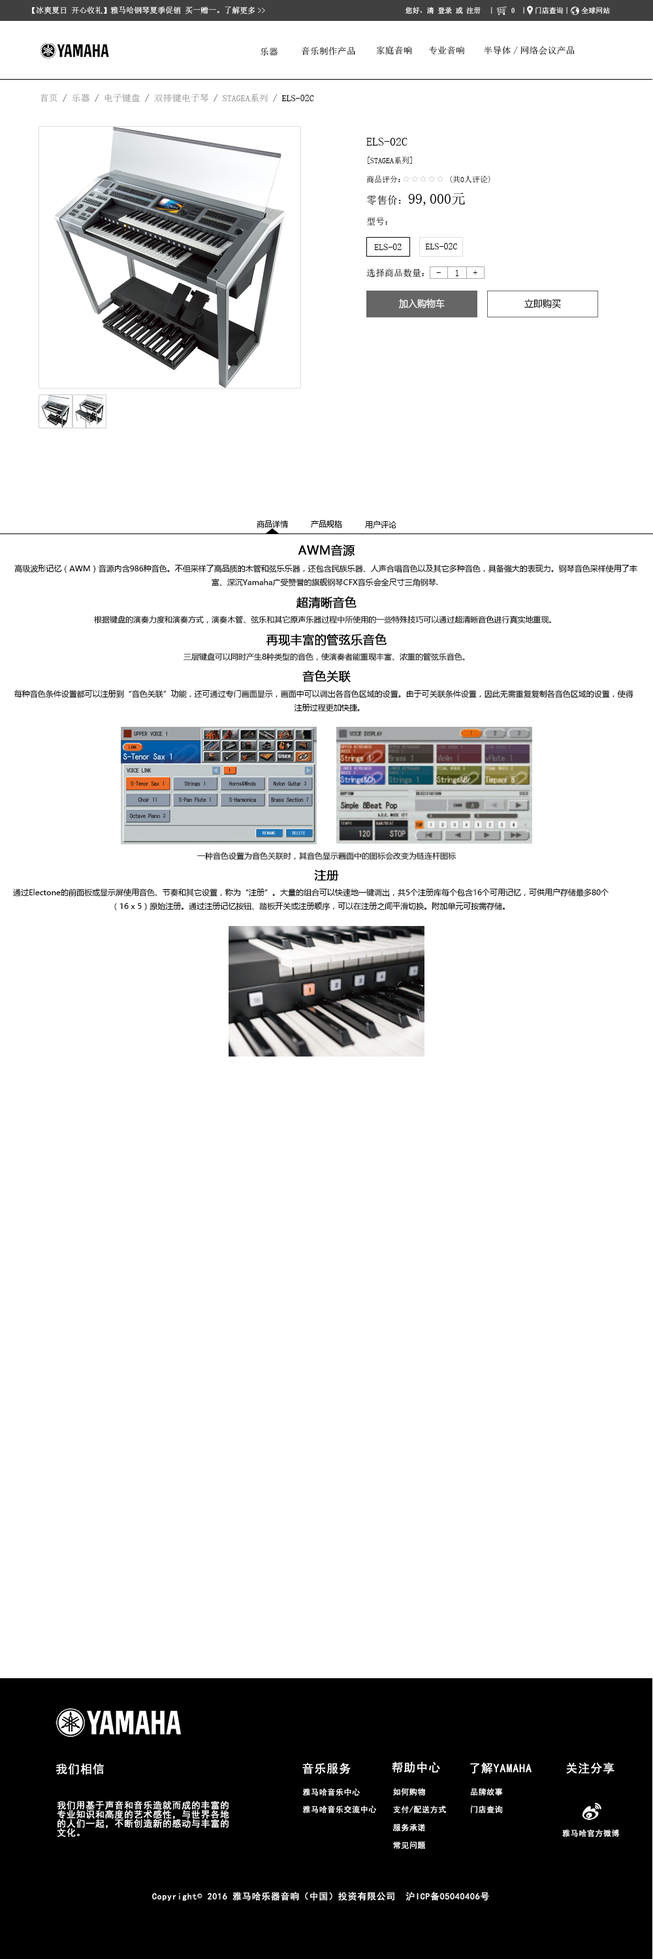
<style>
.page{position:relative;width:653px;height:1959px;background:#ffffff}
.page>*{position:absolute;margin:0}
.t1{font:7.8px "SimSun";color:#ffffff}
.t2{font:7.2px "SimSun";color:#ffffff}
.t3{font:9px "SimSun"}
.t4{font:9px "SimSun";color:#000000}
.t5{font:9px "SimSun";color:#010101}
.t6{font:9.1px "SimSun";color:#000000}
.t7{font:9.1px "SimSun";color:#999999}
.t8{font:11.8px "SimSun";color:#000000}
.t9{font:7.8px "SimSun";color:#000000}
.t10{font:14.4px "SimSun";color:#000000}
.t11{font:10.4px "SimSun";color:#000000}
.t12{font:9.4px "MicrosoftYaHei";color:#ffffff}
.t13{font:9.4px "MicrosoftYaHei";color:#000000}
.t14{font:7.8px "MicrosoftYaHei";color:#000000}
.t15{font:11.8px "MicrosoftYaHei";color:#000000;font-weight:bold}
.t16{font:7.6px "MicrosoftYaHei";color:#000000}
.t17{font:11.8px "SimHei";letter-spacing:0.05em;color:#ffffff}
.t18{font:7.8px "SimHei";letter-spacing:0.05em;color:#ffffff}
.t19{font:9.1px/9.1px "SimHei";letter-spacing:0.05em;color:#ffffff}
.t20{font:9px "SimHei";letter-spacing:0.05em;color:#ffffff}
.t21{font:9px "SimSun";letter-spacing:0.05em;color:#ffffff}
</style>
<div class="page">
<p class="t1" style="left:32px;top:7px;width:233px;height:7px">【冰爽夏日 开心收礼】雅马哈钢琴夏季促销 买一赠一。 了解更多&gt;&gt;</p>
<p class="t2" style="left:406px;top:7px;width:204px;height:7px">您好，清 登录 或 注册  丨    ０ 丨  门店查询丨   全球网站</p>
<p class="t3" style="left:261px;top:48px;width:17px;height:8px">乐器</p>
<p class="t4" style="left:301px;top:46px;width:54px;height:10px">音乐制作产品</p>
<p class="t4" style="left:376px;top:46px;width:36px;height:9px">家庭音响</p>
<p class="t4" style="left:428px;top:46px;width:36px;height:9px">专业音响</p>
<p class="t5" style="left:484px;top:46px;width:90px;height:9px">半导体/网络会议产品</p>
<p class="t6" style="left:40px;top:93px;width:274px;height:10px"><span class="t7">首页</span> / <span class="t7">乐器</span> / <span class="t7">电子键盘</span> / <span class="t7">双排键电子琴</span> / <span class="t7">STAGEA系列</span> / ELS-02C</p>
<p class="t8" style="left:366px;top:137px;width:42px;height:9px">ELS-02C</p>
<p class="t9" style="left:368px;top:157px;width:44px;height:7px">[STAGEA系列]</p>
<p class="t9" style="left:366px;top:176px;width:124px;height:8px">商品评分：           (共0人评论)</p>
<p class="t10" style="left:366px;top:193px;width:100px;height:13px"><span class="t11">零售价：</span>99,000元</p>
<p class="t6" style="left:367px;top:217px;width:20px;height:8px">型号：</p>
<p class="t6" style="left:374px;top:244px;width:28px;height:7px">ELS-02</p>
<p class="t6" style="left:425px;top:243px;width:33px;height:7px">ELS-02C</p>
<p class="t6" style="left:366px;top:268px;width:58px;height:10px">选择商品数量：</p>
<p class="t6" style="left:456px;top:270px;width:3px;height:6px">1</p>
<p class="t6" style="left:436px;top:272px;width:5px;height:1px">-</p>
<p class="t6" style="left:473px;top:270px;width:4px;height:5px">+</p>
<p class="t12" style="left:399px;top:298px;width:46px;height:11px">加入购物车</p>
<p class="t13" style="left:524px;top:299px;width:37px;height:10px">立即购买</p>
<p class="t14" style="left:257px;top:520px;width:32px;height:8px">商品详情</p>
<p class="t14" style="left:311px;top:520px;width:31px;height:8px">产品规格</p>
<p class="t14" style="left:365px;top:521px;width:31px;height:7px">用户评论</p>
<p class="t15" style="left:298px;top:544px;width:57px;height:12px">AWM音源</p>
<p class="t14" style="left:14px;top:564px;width:623px;height:22px;text-align:center">高级波形记忆（AWM）音源内含986种音色。不但采样了高品质的木管和弦乐乐器，还包含民族乐器、人声合唱音色以及其它多种音色，具备强大的表现力。钢琴音色采样使用了丰<br>富、深沉Yamaha广受赞誉的旗舰钢琴CFX音乐会全尺寸三角钢琴.</p>
<p class="t15" style="left:297px;top:596px;width:60px;height:13px">超清晰音色</p>
<p class="t16" style="left:94px;top:615px;width:458px;height:9px">根据键盘的演奏力度和演奏方式，演奏木管、弦乐和其它原声乐器过程中所使用的一些特殊技巧可以通过超清晰音色进行真实地重现。</p>
<p class="t15" style="left:266px;top:633px;width:121px;height:13px">再现丰富的管弦乐音色</p>
<p class="t16" style="left:184px;top:652px;width:281px;height:9px">三层键盘可以同时产生8种类型的音色，使演奏者能重现丰富、浓重的管弦乐音色。</p>
<p class="t15" style="left:302px;top:670px;width:49px;height:12px">音色关联</p>
<p class="t14" style="left:14px;top:690px;width:619px;height:22px;text-align:center">每种音色条件设置都可以注册到“音色关联”功能，还可通过专门画面显示，画面中可以调出各音色区域的设置。由于可关联条件设置，因此无需重复复制各音色区域的设置，使得<br>     注册过程更加快捷。</p>
<p class="t16" style="left:197px;top:852px;width:260px;height:8px">一种音色设置为音色关联时，其音色显示画面中的图标会改变为链连杆图标</p>
<p class="t15" style="left:314px;top:870px;width:25px;height:11px">注册</p>
<p class="t14" style="left:13px;top:888px;width:596px;height:22px;text-align:center">通过Electone的前面板或显示屏使用音色、节奏和其它设置，称为“注册”。大量的组合可以快速地一键调出，共5个注册库每个包含16个可用记忆，可供用户存储最多80个<br>（16 x 5）原始注册。通过注册记忆按钮、踏板开关或注册顺序，可以在注册之间平滑切换。附加单元可按需存储。</p>
<p class="t17" style="left:56px;top:1763px;width:48px;height:12px">我们相信</p>
<p class="t17" style="left:302px;top:1763px;width:49px;height:11px">音乐服务</p>
<p class="t17" style="left:392px;top:1762px;width:48px;height:11px">帮助中心</p>
<p class="t17" style="left:470px;top:1763px;width:62px;height:11px">了解YAMAHA</p>
<p class="t17" style="left:566px;top:1763px;width:49px;height:11px">关注分享</p>
<p class="t18" style="left:303px;top:1788px;width:57px;height:8px">雅马哈音乐中心</p>
<p class="t18" style="left:393px;top:1788px;width:32px;height:8px">如何购物</p>
<p class="t18" style="left:471px;top:1788px;width:32px;height:8px">品牌故事</p>
<p class="t19" style="left:57px;top:1801px;width:172px;height:36px">我们用基于声音和音乐造就而成的丰富的<br>专业知识和高度的艺术感性，与世界各地<br>的人们一起，不断创造新的感动与丰富的<br>文化。</p>
<p class="t18" style="left:303px;top:1806px;width:73px;height:8px">雅马哈音乐交流中心</p>
<p class="t18" style="left:393px;top:1806px;width:53px;height:8px">支付/配送方式</p>
<p class="t18" style="left:471px;top:1806px;width:32px;height:8px">门店查询</p>
<p class="t18" style="left:393px;top:1824px;width:32px;height:8px">服务承诺</p>
<p class="t18" style="left:562px;top:1829px;width:58px;height:8px">雅马哈官方微博</p>
<p class="t18" style="left:393px;top:1842px;width:32px;height:8px">常见问题</p>
<p class="t20" style="left:152px;top:1892px;width:337px;height:9px">Copyright<span class="t21">©</span> 2016 雅马哈乐器音响（中国）投资有限公司  沪ICP备05040406号</p>
</div>
